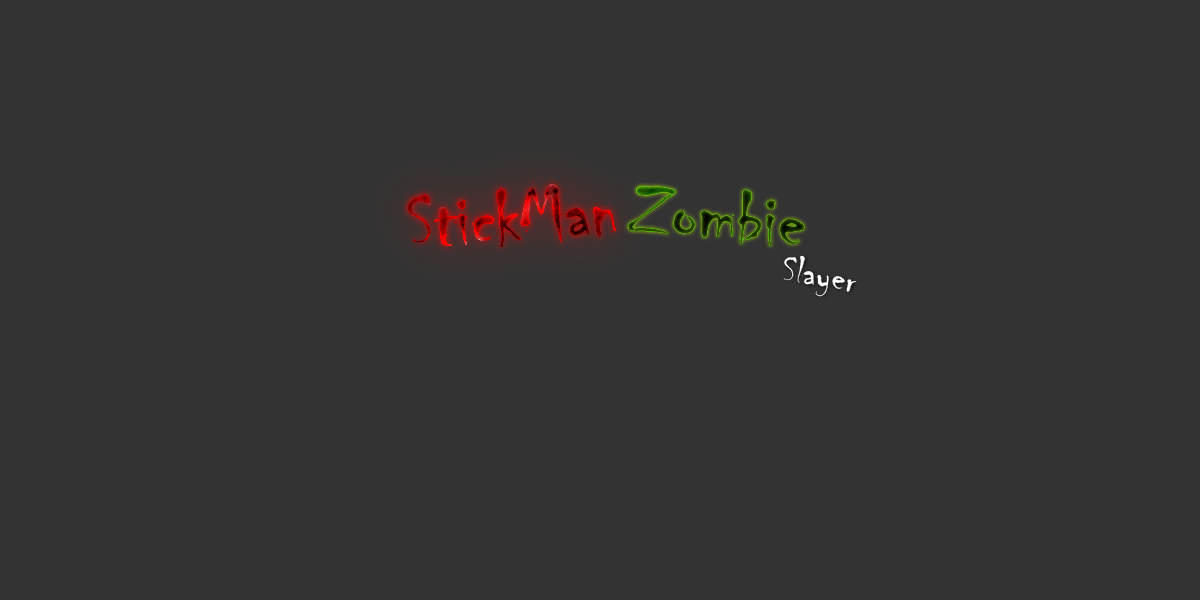
<style>
.page{position:relative;width:1200px;height:600px;background:#333333}
.page>*{position:absolute;margin:0}
.t1{font:80.2px "Chiller-Regular"}
.t2{font:40px "Chiller-Regular";color:#ffffff;scale:1.04 1}
</style>
<div class="page">
<p class="t1" style="left:407px;top:181px;width:209px;height:66px;rotate:-3deg">StickMan</p>
<p class="t2" style="left:783px;top:255px;width:74px;height:42px;rotate:10deg">Slayer</p>
</div>
